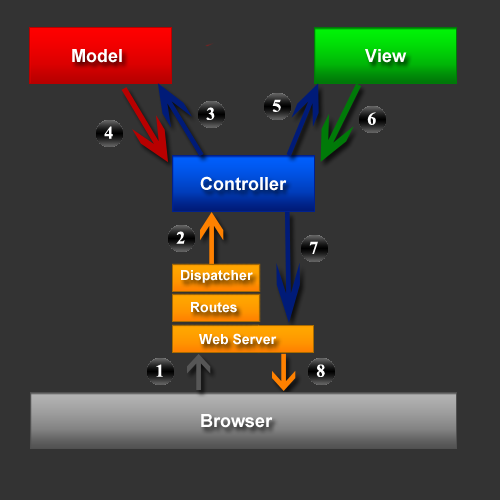
<style>
.page{position:relative;width:500px;height:500px;background:#333333}
.page>*{position:absolute;margin:0}
.t1{font:18px "Arial-BoldMT";color:#ffffff}
.t2{font:18px "TimesNewRomanPS-BoldMT";color:#ffffff}
.t3{font:14px "Arial-BoldMT";color:#ffffff}
</style>
<div class="page">
<p class="t1" style="left:72px;top:49px;width:50px;height:14px">Model</p>
<p class="t1" style="left:365px;top:49px;width:42px;height:14px">View</p>
<p class="t2" style="left:272px;top:99px;width:9px;height:13px">5</p>
<p class="t2" style="left:206px;top:107px;width:9px;height:13px">3</p>
<p class="t2" style="left:367px;top:112px;width:9px;height:13px">6</p>
<p class="t2" style="left:104px;top:126px;width:9px;height:13px">4</p>
<p class="t1" style="left:200px;top:176px;width:87px;height:15px">Controller</p>
<p class="t2" style="left:176px;top:231px;width:9px;height:13px">2</p>
<p class="t2" style="left:309px;top:241px;width:9px;height:13px">7</p>
<p class="t3" style="left:181px;top:270px;width:72px;height:13px">Dispatcher</p>
<p class="t3" style="left:191px;top:302px;width:46px;height:11px">Routes</p>
<p class="t3" style="left:199px;top:333px;width:78px;height:12px">Web Server</p>
<p class="t2" style="left:156px;top:364px;width:7px;height:13px">1</p>
<p class="t2" style="left:316px;top:364px;width:9px;height:13px">8</p>
<p class="t1" style="left:201px;top:414px;width:72px;height:14px">Browser</p>
</div>
